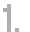
<style>
.page{position:relative;width:30px;height:32px;background:#ffffff}
.page>*{position:absolute;margin:0}
.t1{font:38px "Small Fonts";color:#afafaf}
</style>
<div class="page">
<p class="t1" style="left:3px;top:4px;width:16px;height:28px">1.</p>
</div>
